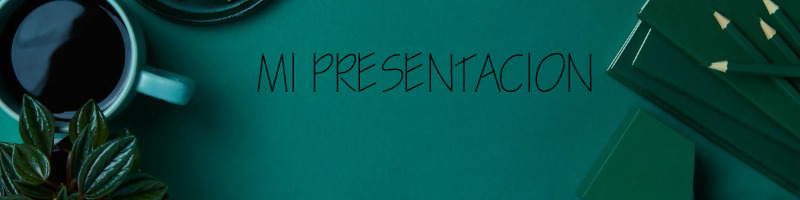
<style>
.page{position:relative;width:800px;height:200px}
.page>*{position:absolute;margin:0}
.t1{font:48px "CityBlueprint";color:#000000}
</style>
<div class="page">
<p class="t1" style="left:257px;top:52px;width:335px;height:41px">MI PRESENTACION</p>
</div>
